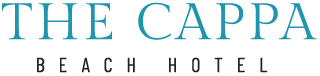
<style>
.page{position:relative;width:320px;height:76px;background:#ffffff}
.page>*{position:absolute;margin:0}
.t1{font:51px "GildaDisplay-Regular";letter-spacing:0.08em;color:#2095ae}
.t2{font:20.2px "BarlowCondensed-Regular";letter-spacing:0.685em;color:#222222}
</style>
<div class="page">
<p class="t1" style="left:2px;top:2px;width:315px;height:38px">THE CAPPA</p>
<p class="t2" style="left:37px;top:57px;width:231px;height:16px">BEACH HOTEL</p>
</div>
